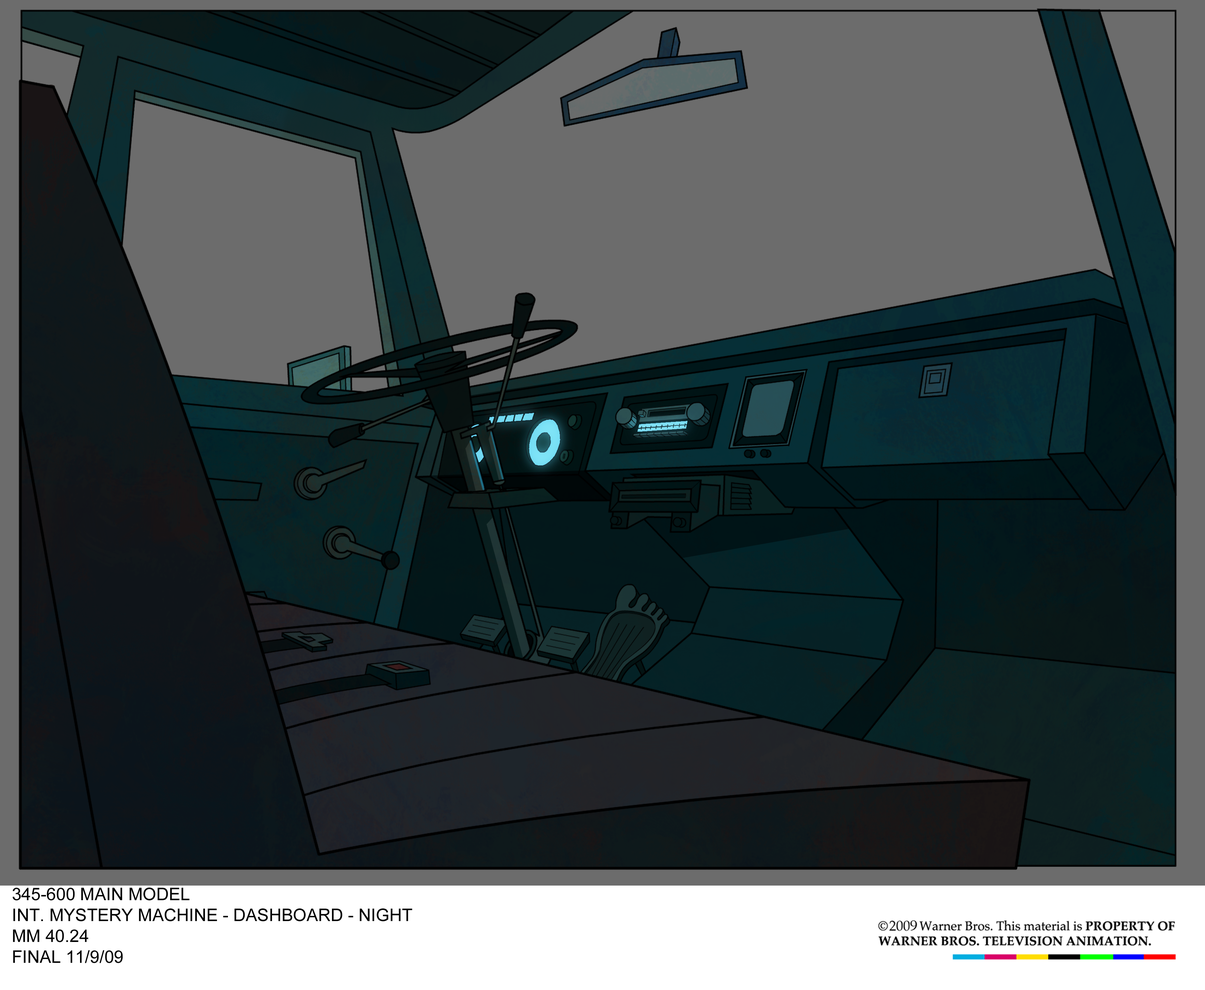
<style>
.page{position:relative;width:1205px;height:990px;background:#6c6c6c}
.page>*{position:absolute;margin:0}
.t1{font:17.3px "ArialMT";color:#000000}
</style>
<div class="page">
<p class="t1" style="left:13px;top:887px;width:399px;height:76px">345-600 MAIN MODEL<br>INT. MYSTERY MACHINE - DASHBOARD - NIGHT<br>MM 40.24<br>FINAL 11/9/09</p>
</div>
